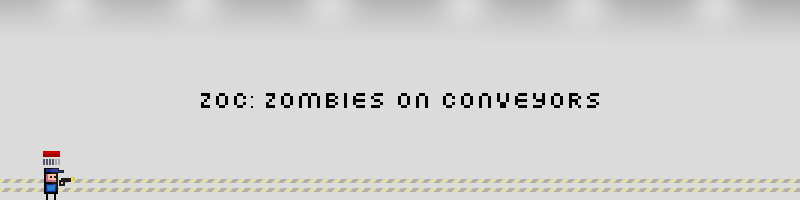
<style>
.page{position:relative;width:800px;height:200px;background:#dbdbdb}
.page>*{position:absolute;margin:0}
.t1{font:24px "FFFAtlantisTrial";color:#000000}
.t2{font:24px "VisitorTT1BRK";color:#000000}
</style>
<div class="page">
<p class="t1" style="left:201px;top:93px;width:398px;height:15px">ZoC<span class="t2">:</span> Zombies on Conveyors</p>
</div>
